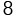
<style>
.page{position:relative;width:16px;height:16px;background:#ffffff}
.page>*{position:absolute;margin:0}
.t1{font:20px "DengXian";color:#000000}
</style>
<div class="page">
<p class="t1" style="left:3px;top:1px;width:10px;height:14px">8</p>
</div>
